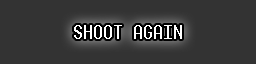
<style>
.page{position:relative;width:256px;height:64px;background:#333333}
.page>*{position:absolute;margin:0}
.t1{font:18px "Terminal";color:#ffffff}
</style>
<div class="page">
<p class="t1" style="left:74px;top:25px;width:108px;height:14px">SHOOT AGAIN</p>
</div>
